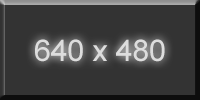
<style>
.page{position:relative;width:200px;height:100px;background:#333333}
.page>*{position:absolute;margin:0}
.t1{font:30px "ArialMT";color:#dddddd}
</style>
<div class="page">
<p class="t1" style="left:35px;top:39px;width:130px;height:23px">640 x 480</p>
</div>
